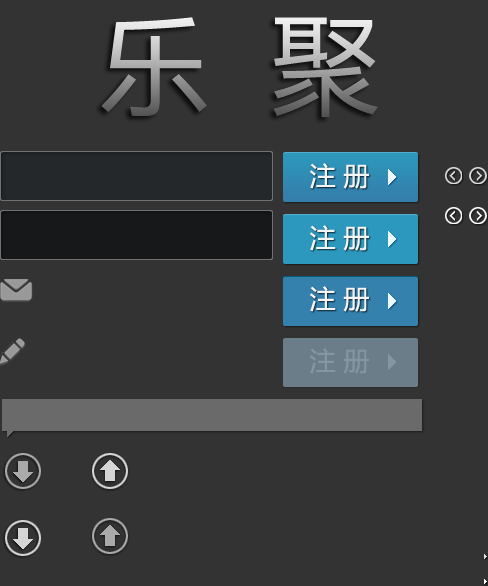
<style>
.page{position:relative;width:488px;height:586px;background:#333333}
.page>*{position:absolute;margin:0}
.t1{font:26px "MicrosoftYaHei";color:#f5f5f5}
.t2{font:26px "MicrosoftYaHei";color:#84969f}
</style>
<div class="page">
<p class="t1" style="left:309px;top:163px;width:60px;height:26px">注 册</p>
<p class="t1" style="left:309px;top:225px;width:60px;height:26px">注 册</p>
<p class="t1" style="left:309px;top:286px;width:60px;height:26px">注 册</p>
<p class="t2" style="left:309px;top:348px;width:60px;height:26px">注 册</p>
</div>
